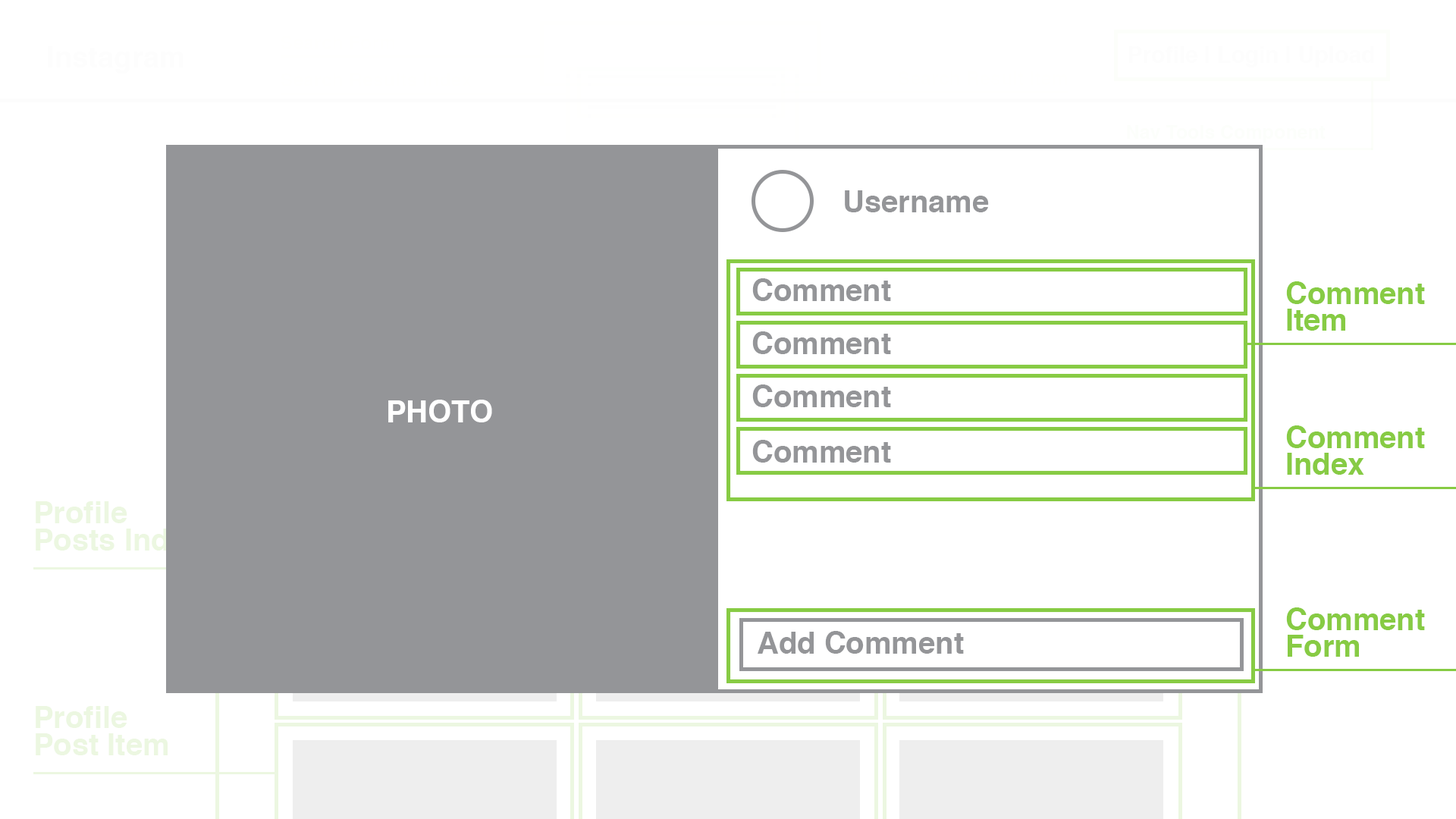
<style>
.page{position:relative;width:1456px;height:819px;background:#ffffff}
.page>*{position:absolute;margin:0}
.t1{font:30.3px "Helvetica-Bold";color:#949598}
.t2{font:30.3px/26.8px "Helvetica-Bold";color:#87cb44}
.t3{font:30.3px "Helvetica-Bold";color:#ffffff}
.t4{font:30.3px/26.8px "Helvetica-Bold";color:#ecf7e1}
</style>
<div class="page">
<p class="t1" style="left:845px;top:190px;width:144px;height:22px">Username</p>
<p class="t1" style="left:752px;top:278px;width:139px;height:23px">Comment</p>
<p class="t2" style="left:1286px;top:281px;width:139px;height:50px">Comment <br>Item</p>
<p class="t1" style="left:752px;top:331px;width:139px;height:23px">Comment</p>
<p class="t1" style="left:752px;top:384px;width:139px;height:23px">Comment</p>
<p class="t3" style="left:388px;top:400px;width:104px;height:22px">PHOTO</p>
<p class="t2" style="left:1286px;top:425px;width:139px;height:50px">Comment <br>Index</p>
<p class="t1" style="left:752px;top:440px;width:139px;height:23px">Comment</p>
<p class="t2" style="left:1286px;top:607px;width:139px;height:50px">Comment <br>Form</p>
<p class="t1" style="left:758px;top:631px;width:206px;height:23px">Add Comment</p>
<p class="t4" style="left:36px;top:706px;width:132px;height:49px">Profile<br>Post Item</p>
</div>
